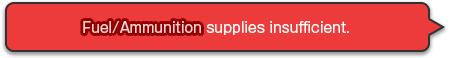
<style>
.page{position:relative;width:450px;height:58px;background:#ed3b3b}
.page>*{position:absolute;margin:0}
.t1{font:14px "GothicMB101Pro-Regular";color:#ffffff}
.t2{font:14px "GothicMB101Pro-Regular";color:#ffd3d3}
</style>
<div class="page">
<p class="t1" style="left:83px;top:21px;width:266px;height:14px"><span class="t2">Fuel/Ammunition</span> supplies insufficient.</p>
<p class="t1" style="left:83px;top:21px;width:266px;height:14px"><span class="t2">Fuel/Ammunition</span> supplies insufficient.</p>
</div>
